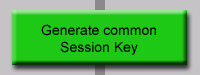
<style>
.page{position:relative;width:200px;height:75px;background:#1ec915}
.page>*{position:absolute;margin:0}
.t1{font:14px "ArialMT";color:#000000}
</style>
<div class="page">
<p class="t1" style="left:41px;top:24px;width:115px;height:31px;text-align:center">Generate common<br>Session Key</p>
</div>
